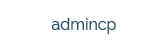
<style>
.page{position:relative;width:168px;height:48px;background:#ffffff}
.page>*{position:absolute;margin:0}
.t1{font:16px "Raleway-Regular";color:#264d5f}
</style>
<div class="page">
<p class="t1" style="left:51px;top:18px;width:65px;height:16px">admincp</p>
</div>
